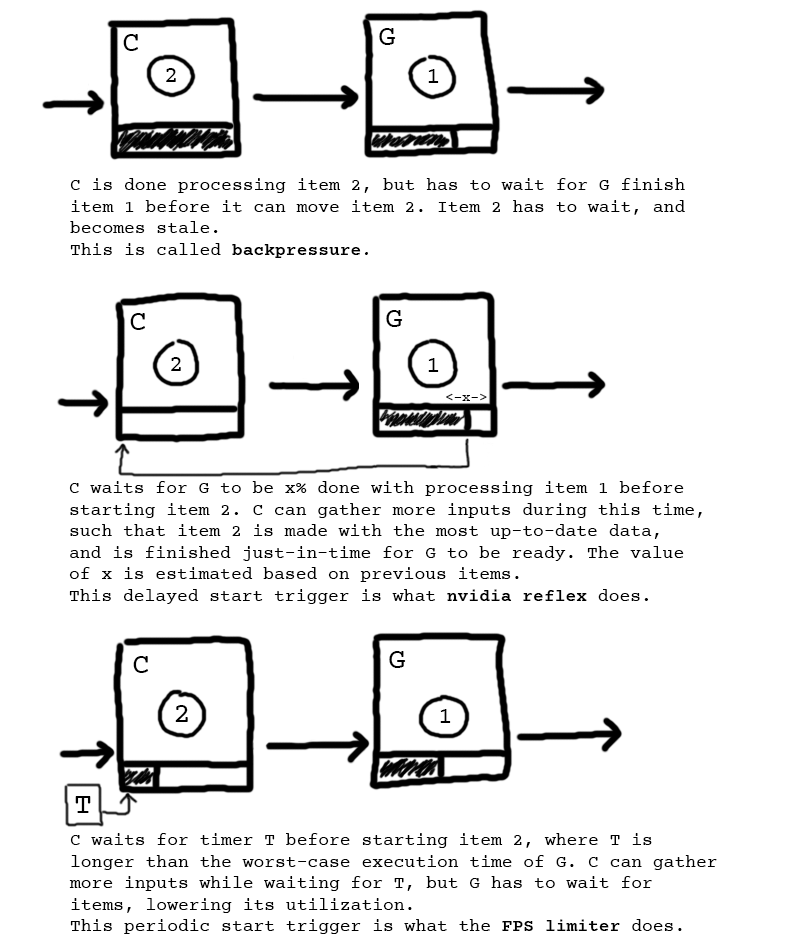
<style>
.page{position:relative;width:800px;height:952px;background:#ffffff}
.page>*{position:absolute;margin:0}
.t1{font:30px "CourierPrime";color:#000000}
.t2{font:24px "CourierPrime";color:#000000}
.t3{font:18px "CourierPrime";color:#000000}
.t4{font:18px "CourierPrime-SemiBold";color:#000000}
.t5{font:18px "CourierPrime-Italic";color:#000000}
.t6{font:14px "CourierPrime";color:#000000}
</style>
<div class="page">
<p class="t1" style="left:379px;top:28px;width:17px;height:17px">G</p>
<p class="t1" style="left:123px;top:34px;width:15px;height:17px">C</p>
<p class="t2" style="left:166px;top:68px;width:10px;height:14px">2</p>
<p class="t2" style="left:428px;top:69px;width:11px;height:14px">1</p>
<p class="t3" style="left:70px;top:178px;width:615px;height:80px">C is done processing item 2, but has to wait for G finish <br>item 1 before it can move item 2. Item 2 has to wait, and <br>becomes stale.<br>This is called <span class="t4">backpressure</span><span class="t5">.</span></p>
<p class="t1" style="left:130px;top:313px;width:15px;height:17px">C</p>
<p class="t1" style="left:386px;top:310px;width:17px;height:17px">G</p>
<p class="t2" style="left:171px;top:357px;width:10px;height:14px">2</p>
<p class="t2" style="left:428px;top:358px;width:11px;height:14px">1</p>
<p class="t6" style="left:446px;top:393px;width:41px;height:8px">&lt;-x-&gt;</p>
<p class="t3" style="left:69px;top:481px;width:633px;height:123px">C waits for G to be x% done with processing item 1 before<br>starting item 2. C can gather more inputs during this time, <br>such that item 2 is made with the most up-to-date data, <br>and is finished just-in-time for G to be ready. The value <br>of x is estimated based on previous items.<br>This delayed start trigger is what <span class="t4">nvidia reflex</span> does.</p>
<p class="t1" style="left:389px;top:651px;width:17px;height:17px">G</p>
<p class="t1" style="left:133px;top:656px;width:15px;height:17px">C</p>
<p class="t1" style="left:175px;top:705px;width:13px;height:17px">2</p>
<p class="t2" style="left:440px;top:709px;width:11px;height:14px">1</p>
<p class="t1" style="left:75px;top:796px;width:16px;height:17px">T</p>
<p class="t3" style="left:69px;top:833px;width:648px;height:101px">C waits for timer T before starting item 2, where T is <br>longer than the worst-case execution time of G. C can gather<br>more inputs while waiting for T, but G has to wait for<br>items, lowering its utilization.<br>This periodic start trigger is what the <span class="t4">FPS limiter</span> does.</p>
</div>
